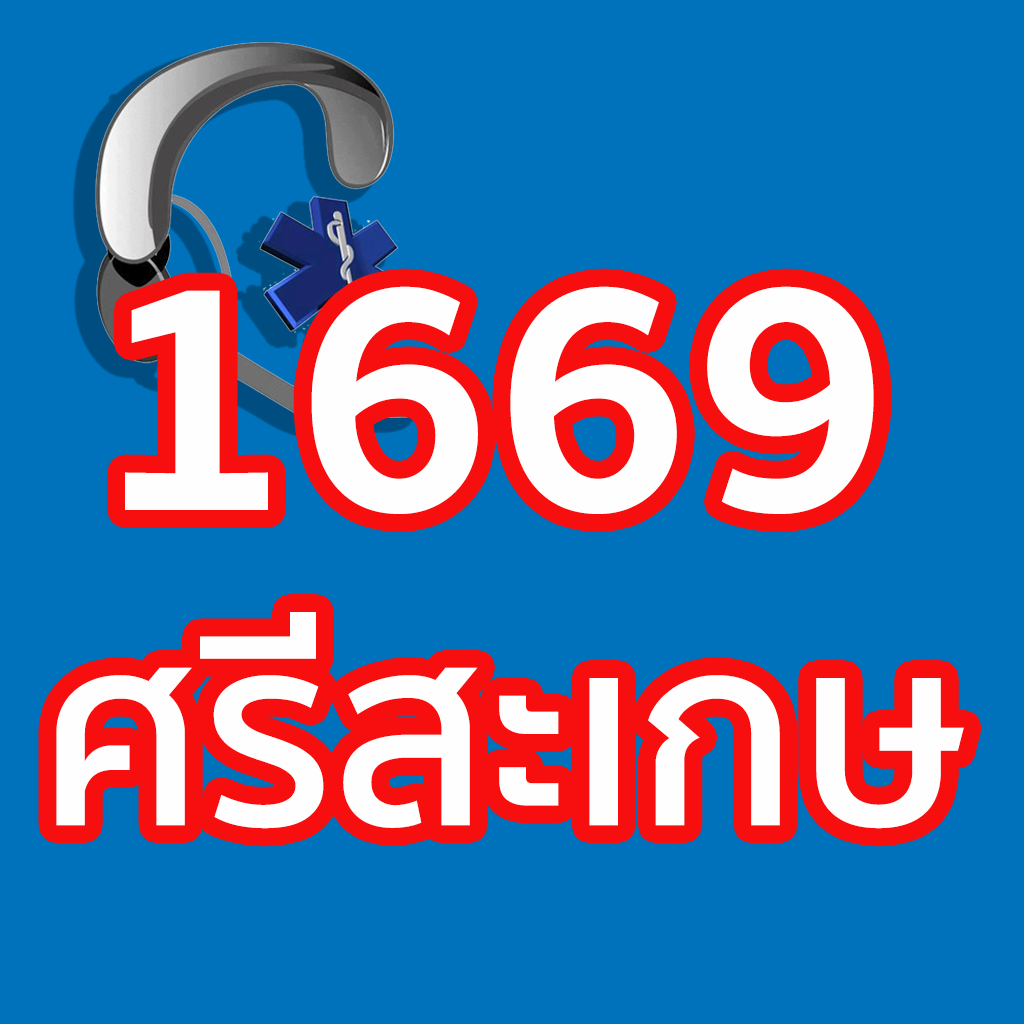
<style>
.page{position:relative;width:1024px;height:1024px;background:#0072bc}
.page>*{position:absolute;margin:0}
.t1{font:262.6px "SukhumvitSet-SemiBold";color:#fffefe}
.t2{font:337px "SukhumvitSet-Bold";color:#fffefe}
</style>
<div class="page">
<p class="t1" style="left:56px;top:286px;width:908px;height:543px;text-align:center"><span class="t2">1669 <br></span>ศรีสะเกษ</p>
</div>
